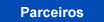
<style>
.page{position:relative;width:104px;height:22px;background:#034cb5}
.page>*{position:absolute;margin:0}
.t1{font:14px "Arial-BoldMT";color:#ffffff}
</style>
<div class="page">
<p class="t1" style="left:21px;top:7px;width:63px;height:11px">Parceiros</p>
</div>
